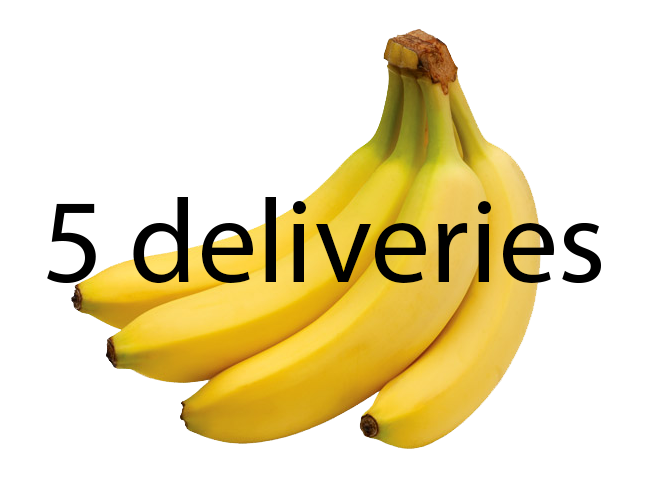
<style>
.page{position:relative;width:650px;height:500px;background:#ffffff}
.page>*{position:absolute;margin:0}
.t1{font:120px "MyriadHebrew-Regular";color:#000000}
</style>
<div class="page">
<p class="t1" style="left:47px;top:197px;width:554px;height:87px">5 deliveries</p>
</div>
